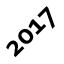
<style>
.page{position:relative;width:64px;height:64px;background:#ffffff}
.page>*{position:absolute;margin:0}
.t1{font:30.3px "Corbel-Bold";color:#000000}
</style>
<div class="page">
<p class="t1" style="left:6px;top:6px;width:49px;height:51px;rotate:-45deg">2017</p>
</div>
